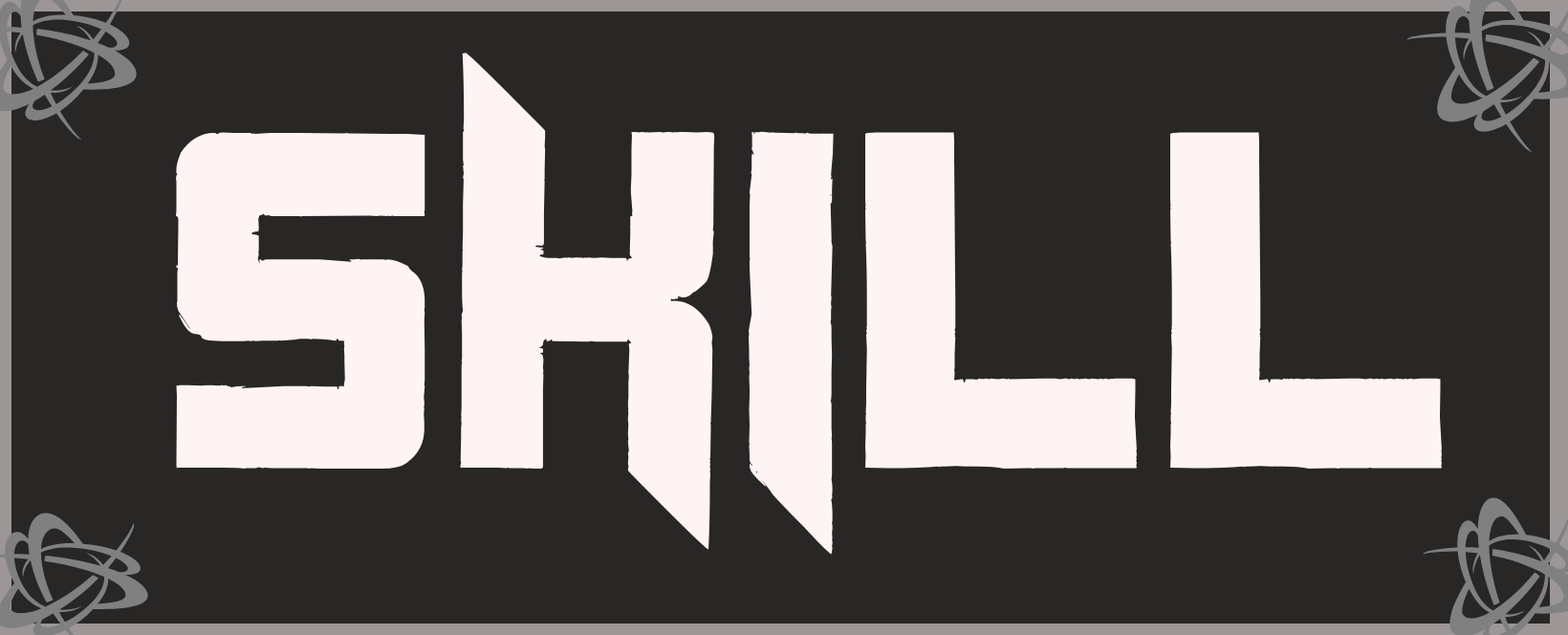
<style>
.page{position:relative;width:1568px;height:635px;background:#292626}
.page>*{position:absolute;margin:0}
.t1{font:478px "Duplexide";color:#fff4f4}
</style>
<div class="page">
<p class="t1" style="left:176px;top:53px;width:1266px;height:502px">Skill</p>
</div>
